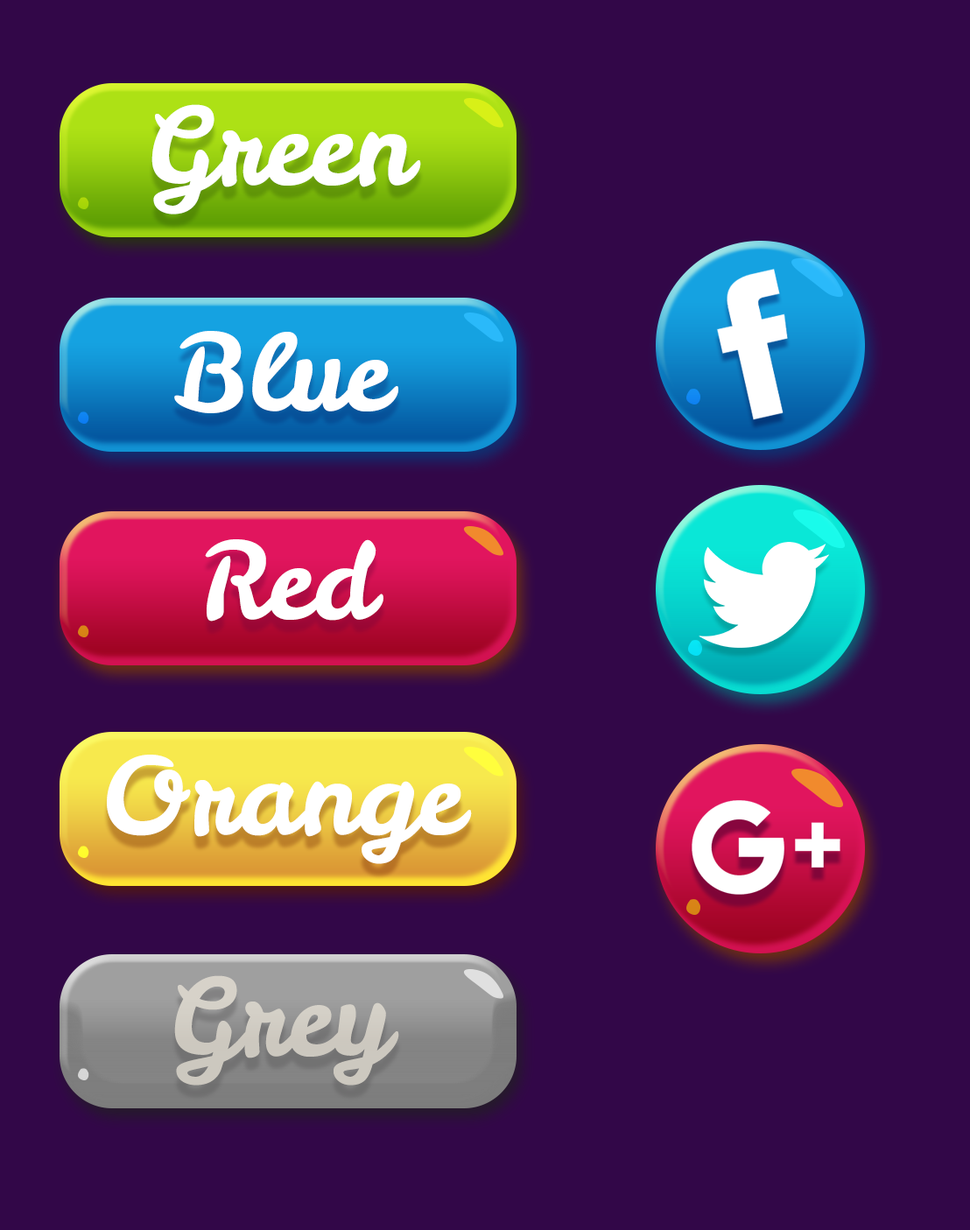
<style>
.page{position:relative;width:970px;height:1230px;background:#320748}
.page>*{position:absolute;margin:0}
.t1{font:105.9px "LeckerliOne";color:#ffffff}
.t2{font:105.9px "LeckerliOne";color:#cdc8bf}
</style>
<div class="page">
<p class="t1" style="left:151px;top:104px;width:270px;height:110px">Green</p>
<p class="t1" style="left:174px;top:331px;width:224px;height:82px">Blue</p>
<p class="t1" style="left:205px;top:539px;width:178px;height:82px">Red</p>
<p class="t1" style="left:107px;top:754px;width:365px;height:110px">Orange</p>
<p class="t2" style="left:174px;top:975px;width:225px;height:110px">Grey</p>
</div>
